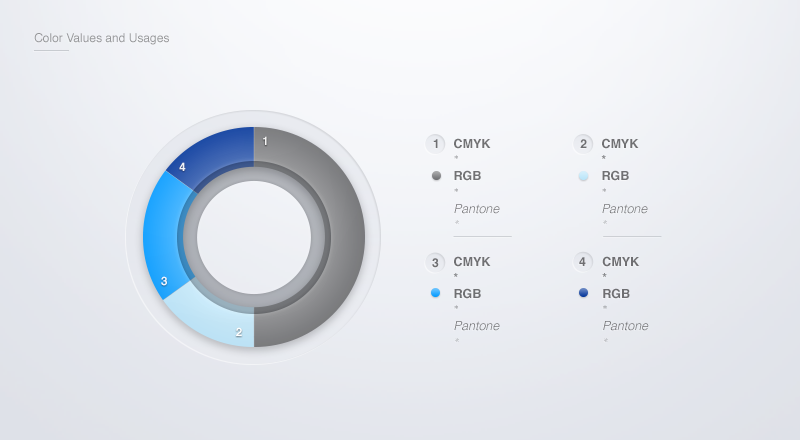
<style>
.page{position:relative;width:800px;height:440px}
.page>*{position:absolute;margin:0}
.t1{font:12px "Helvetica";color:#97979a}
.t2{font:11.6px "Helvetica-Bold";color:#ffffff}
.t3{font:12.5px "Helvetica-Bold";color:#6f6f72}
.t4{font:12.5px/16.2px "Helvetica-LightOblique";color:#414042}
.t5{font:12.5px/16.2px "Helvetica-Bold";color:#414042}
.t6{font:12.5px/16.2px "GothamHTF-Book";color:#6d6e71}
.t7{font:12.5px/16.2px "GothamHTF-XLightItalic";color:#6d6e71}
.t8{font:12.5px/16.2px "Helvetica-Bold";color:#6d6e71}
.t9{font:12.5px "Helvetica-Bold";color:#6e6e71}
</style>
<div class="page">
<p class="t1" style="left:34px;top:33px;width:135px;height:12px">Color Values and Usages</p>
<p class="t2" style="left:263px;top:136px;width:4px;height:9px;opacity:0.9">1</p>
<p class="t3" style="left:433px;top:139px;width:5px;height:9px">1</p>
<p class="t4" style="left:454px;top:138px;width:46px;height:86px;opacity:0.8"><span class="t5">CMYK<br></span><span class="t6">*<br></span><span class="t5">RGB<br></span><span class="t6">*<br></span>Pantone<br><span class="t7">*</span></p>
<p class="t3" style="left:580px;top:139px;width:7px;height:9px">2</p>
<p class="t4" style="left:601px;top:138px;width:47px;height:86px;opacity:0.8"><span class="t5">CMYK<br></span><span class="t8">*<br></span><span class="t5">RGB<br></span><span class="t6">*<br></span>Pantone<br><span class="t7">*</span></p>
<p class="t2" style="left:179px;top:162px;width:7px;height:9px;opacity:0.9">4</p>
<p class="t4" style="left:453px;top:256px;width:47px;height:86px;opacity:0.8"><span class="t5">CMYK<br></span><span class="t8">*<br></span><span class="t5">RGB<br></span><span class="t6">*<br></span>Pantone<br><span class="t7">*</span></p>
<p class="t9" style="left:579px;top:257px;width:7px;height:9px">4</p>
<p class="t4" style="left:602px;top:256px;width:47px;height:86px;opacity:0.8"><span class="t5">CMYK<br></span><span class="t8">*<br></span><span class="t5">RGB<br></span><span class="t6">*<br></span>Pantone<br><span class="t7">*</span></p>
<p class="t9" style="left:432px;top:258px;width:7px;height:10px">3</p>
<p class="t2" style="left:161px;top:276px;width:6px;height:10px;opacity:0.9">3</p>
<p class="t2" style="left:236px;top:327px;width:6px;height:9px">2</p>
</div>
